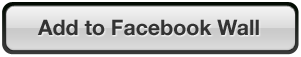
<style>
.page{position:relative;width:301px;height:57px}
.page>*{position:absolute;margin:0}
.t1{font:21.3px "HelveticaNeue-Bold";color:#333333}
</style>
<div class="page">
<p class="t1" style="left:37px;top:19px;width:222px;height:17px">Add to Facebook Wall</p>
</div>
